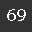
<style>
.page{position:relative;width:32px;height:32px;background:#333333}
.page>*{position:absolute;margin:0}
.t1{font:17.8px "MyriadPro-Regular";color:#ffffff;scale:1.12 1}
</style>
<div class="page">
<p class="t1" style="left:7px;top:9px;width:19px;height:12px">69=5</p>
</div>
